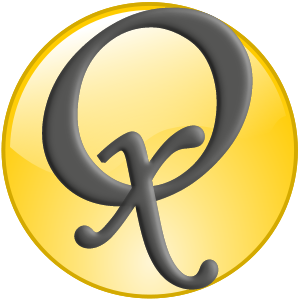
<style>
.page{position:relative;width:300px;height:300px;background:#ffffff}
.page>*{position:absolute;margin:0}
.t1{font:295.3px "FootlightMTLight";color:#555554;font-weight:bold;font-style:italic}
.t2{font:265.6px "MonotypeCorsiva";color:#555554;font-weight:bold;scale:0.94 1}
</style>
<div class="page">
<p class="t1" style="left:42px;top:7px;width:211px;height:200px">O</p>
<p class="t2" style="left:74px;top:125px;width:145px;height:165px">x</p>
</div>
